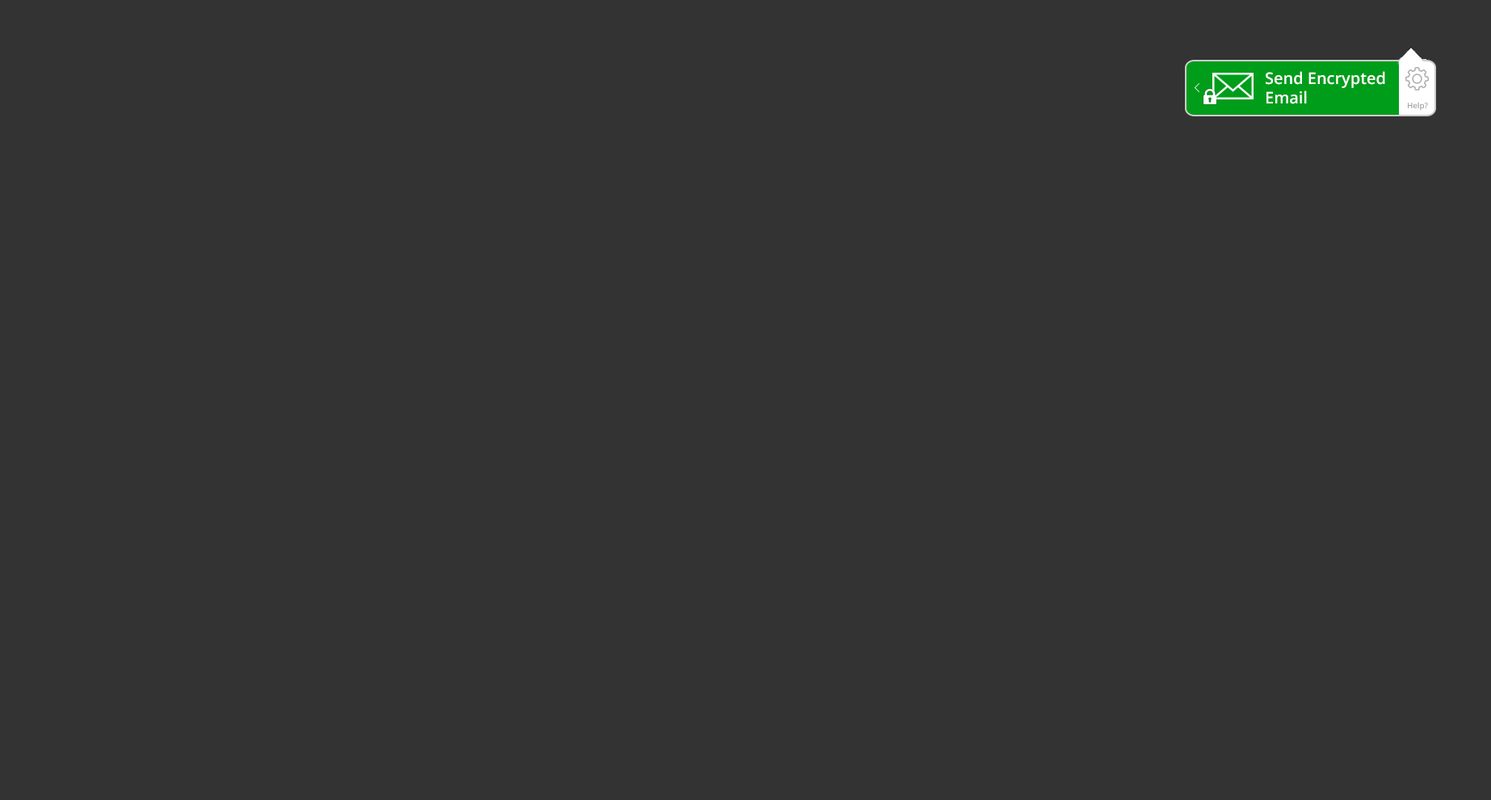
<style>
.page{position:relative;width:1491px;height:800px;background:#333333}
.page>*{position:absolute;margin:0}
.t1{font:16.2px "OpenSans-Semibold";color:#ffffff}
.t2{font:7.6px "OpenSans-Semibold";color:#a3a3a3}
</style>
<div class="page">
<p class="t1" style="left:1266px;top:71px;width:119px;height:33px">Send Encrypted <br>Email</p>
<p class="t2" style="left:1408px;top:102px;width:20px;height:9px">Help?</p>
</div>
